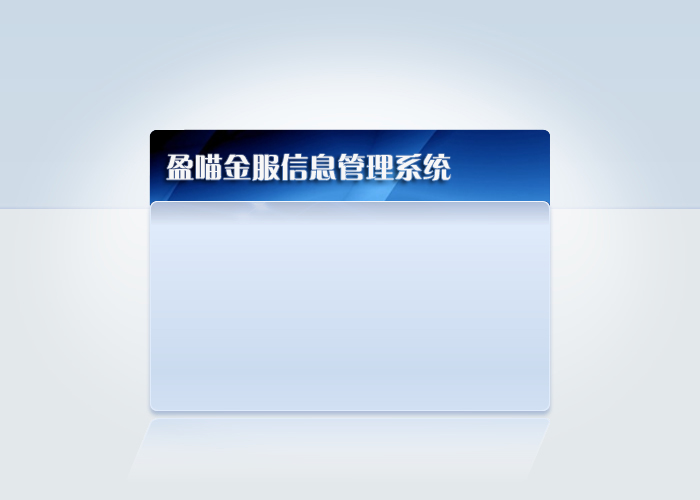
<style>
.page{position:relative;width:700px;height:500px}
.page>*{position:absolute;margin:0}
.t1{font:28px "FZCQJW--GB1-0";letter-spacing:0.02em;color:#f7f7f7}
</style>
<div class="page">
<p class="t1" style="left:166px;top:154px;width:285px;height:27px">盈喵金服信息管理系统</p>
</div>
